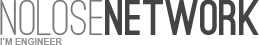
<style>
.page{position:relative;width:259px;height:45px;background:#ffffff}
.page>*{position:absolute;margin:0}
.t1{font:48px "OstrichSans-Black";color:#444444}
.t2{font:52px "OstrichSansRounded-Medium";color:#777777}
.t3{font:9px "Arial-BoldMT";color:#989898}
</style>
<div class="page">
<p class="t1" style="left:0px;top:0px;width:259px;height:36px"><span class="t2">NOLOSE</span>NETWORK</p>
<p class="t3" style="left:0px;top:38px;width:62px;height:7px">I’M ENGINEER</p>
</div>
